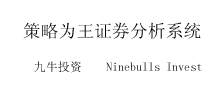
<style>
.page{position:relative;width:217px;height:93px;background:#ffffff}
.page>*{position:absolute;margin:0}
.t1{font:17.8px "SimSun";color:#000000}
.t2{font:12px "SimSun"}
</style>
<div class="page">
<p class="t1" style="left:23px;top:22px;width:178px;height:17px">策略为王证券分析系统</p>
<p class="t2" style="left:34px;top:61px;width:168px;height:12px">九牛投资    Ninebulls Invest</p>
</div>
